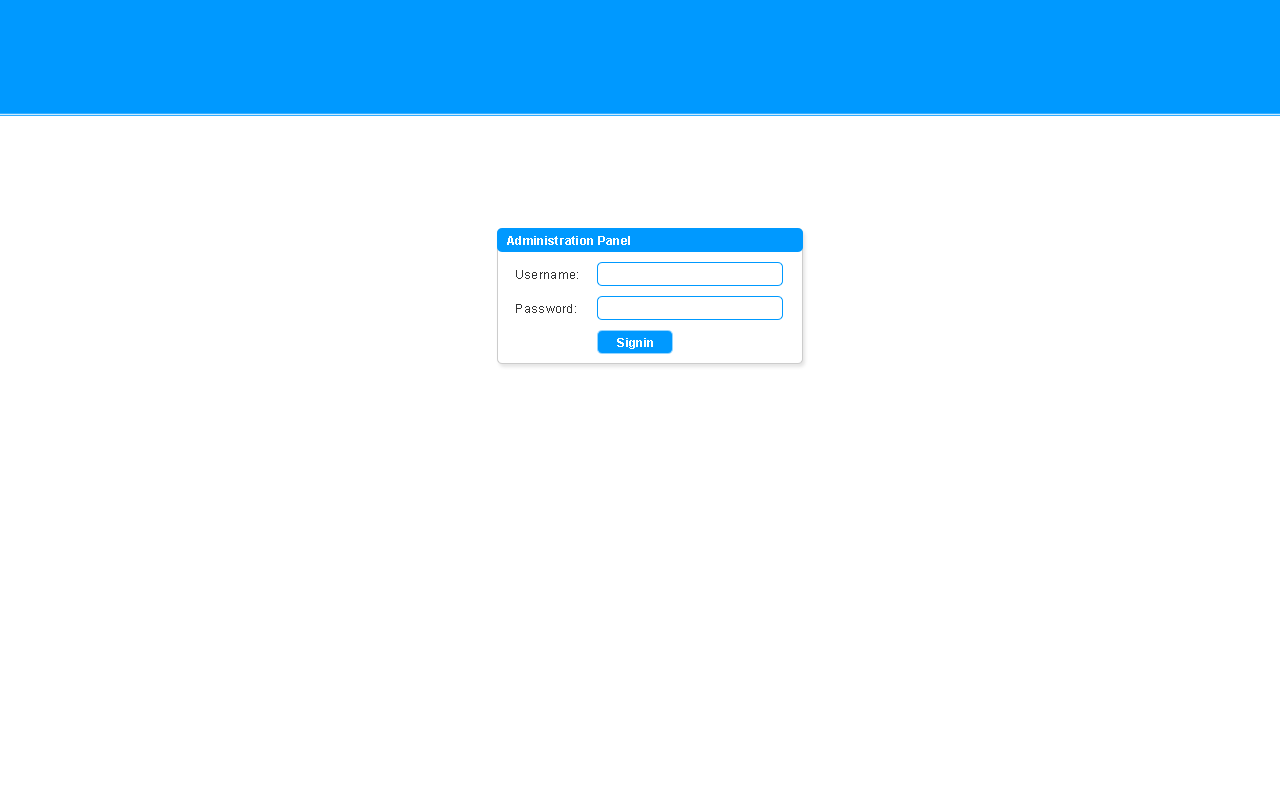
<style>
.page{position:relative;width:1280px;height:800px;background:#ffffff}
.page>*{position:absolute;margin:0}
.t1{font:12px "ArialMT";letter-spacing:0.025em;color:#333333}
.t2{font:12px "Arial-BoldMT";letter-spacing:0.025em;color:#ffffff}
</style>
<div class="page">
<p class="t1" style="left:516px;top:270px;width:62px;height:9px">Username:</p>
<p class="t1" style="left:516px;top:304px;width:60px;height:9px">Password:</p>
<p class="t2" style="left:617px;top:338px;width:36px;height:11px">Signin</p>
</div>
